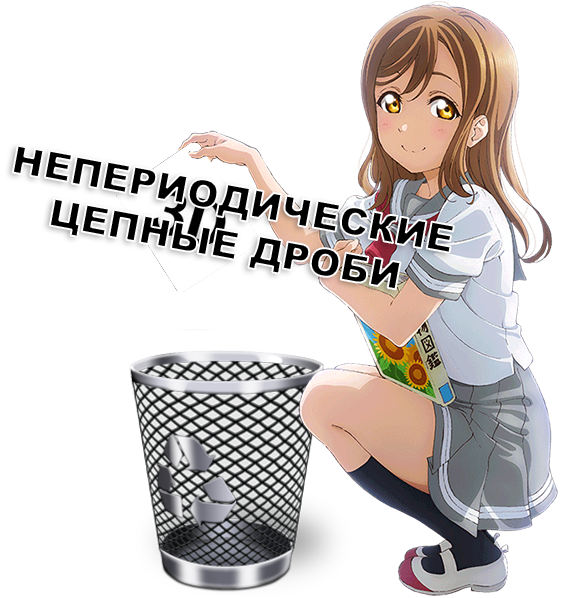
<style>
.page{position:relative;width:580px;height:598px;background:#ffffff}
.page>*{position:absolute;margin:0}
.t1{font:38.1px "Arial-Black";color:#000000}
</style>
<div class="page">
<p class="t1" style="left:12px;top:145px;width:442px;height:145px;text-align:center;rotate:11deg">НЕПЕРИОДИЧЕСКИЕ<br>ЦЕПНЫЕ ДРОБИ</p>
</div>
